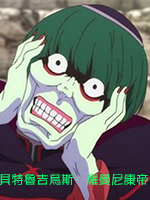
<style>
.page{position:relative;width:150px;height:200px}
.page>*{position:absolute;margin:0}
.t1{font:12px "DFPOP1-W5-WIN-BF";letter-spacing:0.04em;color:#00fa70}
</style>
<div class="page">
<p class="t1" style="left:0px;top:173px;width:148px;height:13px">貝特魯吉烏斯·羅曼尼康帝</p>
</div>
